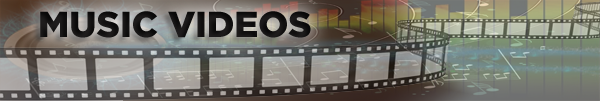
<style>
.page{position:relative;width:600px;height:101px}
.page>*{position:absolute;margin:0}
.t1{font:36px "FluidTitleCaps";color:#000000}
</style>
<div class="page">
<p class="t1" style="left:40px;top:11px;width:271px;height:27px">Music Videos</p>
</div>
